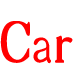
<style>
.page{position:relative;width:74px;height:83px;background:#ffffff}
.page>*{position:absolute;margin:0}
.t1{font:82.7px "18thCentury";color:#ff0000;scale:0.73 1}
</style>
<div class="page">
<p class="t1" style="left:0px;top:21px;width:73px;height:43px">Car</p>
</div>
